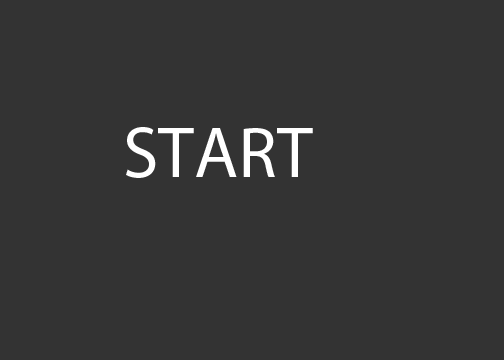
<style>
.page{position:relative;width:504px;height:360px;background:#333333}
.page>*{position:absolute;margin:0}
.t1{font:72px "MyriadPro-Regular";color:#ffffff}
</style>
<div class="page">
<p class="t1" style="left:126px;top:127px;width:187px;height:51px">START</p>
</div>
